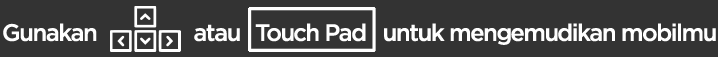
<style>
.page{position:relative;width:718px;height:57px;background:#333333}
.page>*{position:absolute;margin:0}
.t1{font:23.8px "iCielGotham-Medium";letter-spacing:-0.06em;color:#ffffff}
</style>
<div class="page">
<p class="t1" style="left:3px;top:23px;width:713px;height:22px">Gunakan                 atau   Touch Pad   untuk mengemudikan mobilmu</p>
</div>
